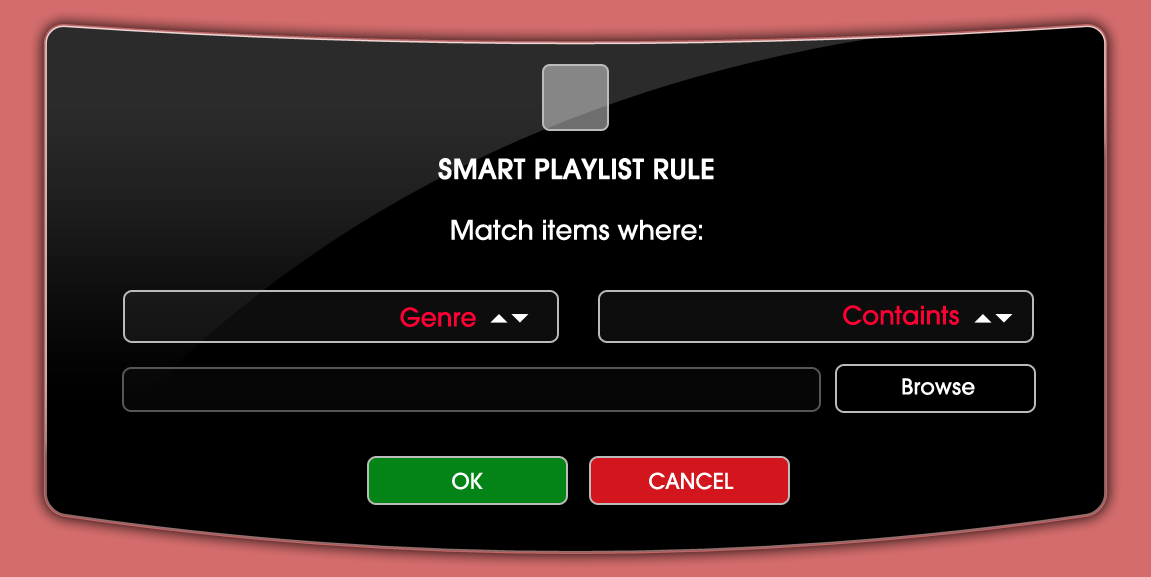
<style>
.page{position:relative;width:1151px;height:577px;background:#000000}
.page>*{position:absolute;margin:0}
.t1{font:29.6px "AvantGardeMdITCTT";color:#ffffff;font-weight:bold}
.t2{font:29.6px "AvantGardeMdITCTT";color:#ffffff}
.t3{font:28px "AvantGardeMdITCTT";color:#ff0033}
.t4{font:24px "AvantGardeMdITCTT";color:#ffffff}
</style>
<div class="page">
<p class="t1" style="left:438px;top:158px;width:276px;height:22px">SMART PLAYLIST RULE</p>
<p class="t2" style="left:451px;top:219px;width:251px;height:22px">Match items where:</p>
<p class="t3" style="left:843px;top:305px;width:116px;height:20px">Containts</p>
<p class="t3" style="left:400px;top:307px;width:76px;height:20px">Genre</p>
<p class="t4" style="left:902px;top:378px;width:73px;height:17px">Browse</p>
<p class="t4" style="left:452px;top:472px;width:31px;height:18px">OK</p>
<p class="t4" style="left:649px;top:472px;width:85px;height:18px">CANCEL</p>
</div>
